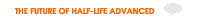
<style>
.page{position:relative;width:200px;height:20px;background:#ffffff}
.page>*{position:absolute;margin:0}
.t1{font:8px "Atlanta-Demi";color:#ff6600}
</style>
<div class="page">
<p class="t1" style="left:15px;top:7px;width:140px;height:8px">THE FUTURE OF HALF-LIFE ADVANCED</p>
</div>
